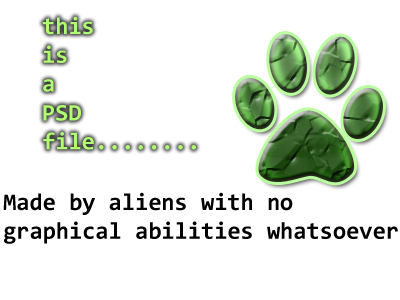
<style>
.page{position:relative;width:400px;height:300px;background:#ffffff}
.page>*{position:absolute;margin:0}
.t1{font:24px "Consolas-Bold";color:#b0fd71}
.t2{font:24px "Consolas-Bold";color:#000000}
</style>
<div class="page">
<p class="t1" style="left:42px;top:16px;width:154px;height:134px">this<br>is<br>a <br>PSD<br>file........</p>
<p class="t2" style="left:3px;top:192px;width:395px;height:52px">Made by aliens with no <br>graphical abilities whatsoever</p>
</div>
